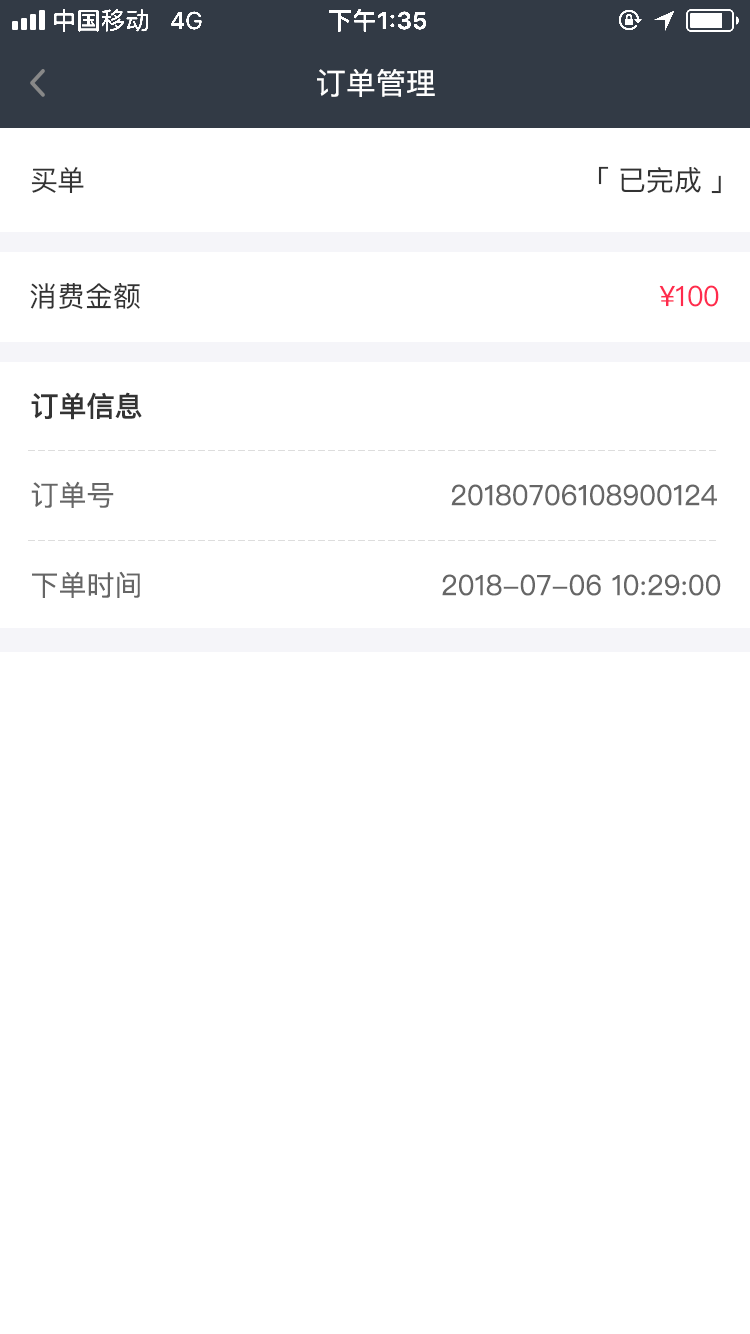
<style>
.page{position:relative;width:750px;height:1334px;background:#ffffff}
.page>*{position:absolute;margin:0}
.t1{font:30px "PingFangSC-Regular";color:#ffffff}
.t2{font:28px "PingFangSC-Regular";color:#333333}
.t3{font:28px "PingFangSC-Regular";color:#ff2b4d}
.t4{font:28px "PingFangSC-Medium";color:#333333}
.t5{font:28px "PingFangSC-Regular";color:#666666}
</style>
<div class="page">
<p class="t1" style="left:317px;top:68px;width:118px;height:29px">订单管理</p>
<p class="t2" style="left:31px;top:166px;width:53px;height:27px">买单</p>
<p class="t2" style="left:598px;top:166px;width:123px;height:28px">「 已完成 」</p>
<p class="t2" style="left:30px;top:283px;width:689px;height:26px">消费金额                                                        <span class="t3">¥100</span></p>
<p class="t4" style="left:31px;top:392px;width:111px;height:28px">订单信息</p>
<p class="t5" style="left:31px;top:481px;width:686px;height:27px">订单号                                    20180706108900124</p>
<p class="t5" style="left:32px;top:571px;width:689px;height:27px">下单时间                                2018-07-06 10:29:00</p>
</div>
